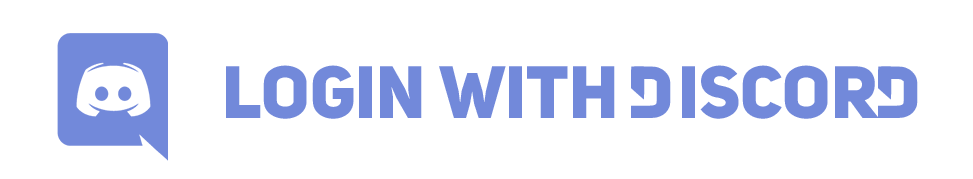
<style>
.page{position:relative;width:973px;height:179px;background:#ffffff}
.page>*{position:absolute;margin:0}
.t1{font:73px "My-FontRegular";color:#7289da}
</style>
<div class="page">
<p class="t1" style="left:226px;top:65px;width:692px;height:54px">LOGIN WITH DISCORD</p>
</div>
